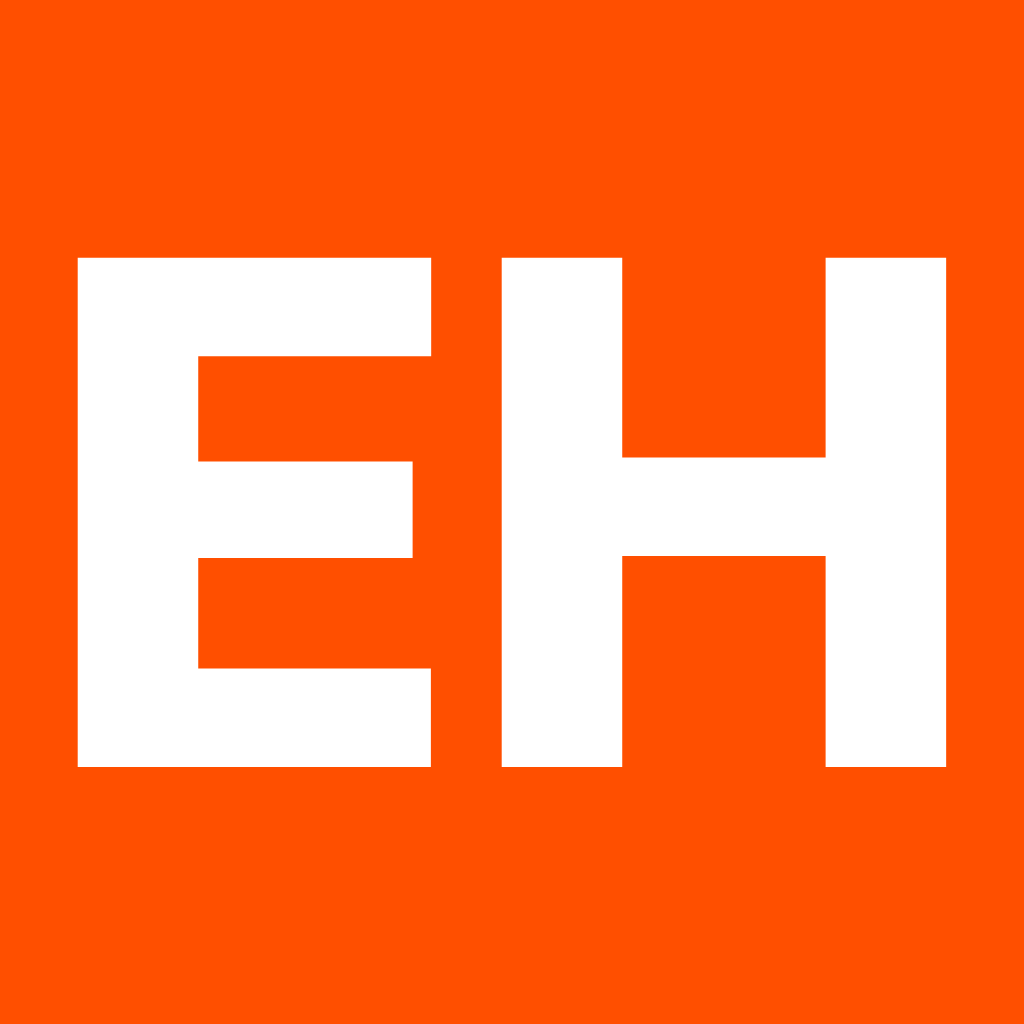
<style>
.page{position:relative;width:1024px;height:1024px;background:#ff4f00}
.page>*{position:absolute;margin:0}
.t1{font:700px "Inter-ExtraBold_14.000opsz_800.000wght";letter-spacing:-0.005em;color:#ffffff}
</style>
<div class="page">
<p class="t1" style="left:77px;top:257px;width:870px;height:510px">EH</p>
</div>
